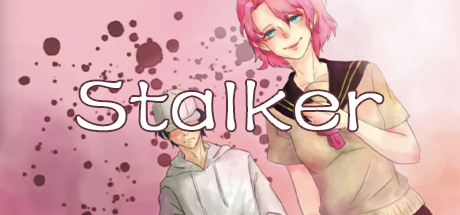
<style>
.page{position:relative;width:460px;height:215px}
.page>*{position:absolute;margin:0}
.t1{font:90px "FZSTK--GBK1-0";color:#ffffff;font-weight:bold}
</style>
<div class="page">
<p class="t1" style="left:76px;top:79px;width:308px;height:53px">Stalker</p>
</div>
